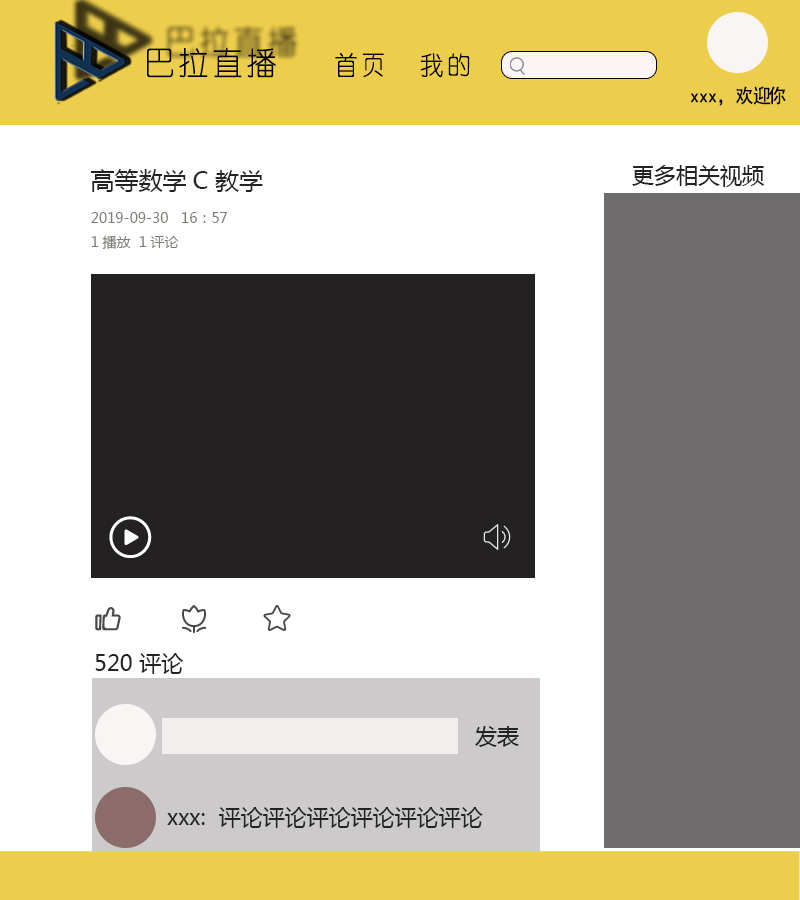
<style>
.page{position:relative;width:800px;height:900px;background:#ffffff}
.page>*{position:absolute;margin:0}
.t1{font:14px "MicrosoftYaHei";color:#7b7c74}
.t2{font:24px "MicrosoftYaHei";color:#232321}
.t3{font:22px "MicrosoftYaHei";color:#232321}
</style>
<div class="page">
<p class="t1" style="left:90px;top:169px;width:173px;height:80px"><span class="t2">高等数学C教学<br></span>2019-09-30   16：57<br>1播放  1评论</p>
<p class="t3" style="left:632px;top:165px;width:132px;height:22px">更多相关视频</p>
<p class="t3" style="left:95px;top:653px;width:88px;height:21px">520 评论</p>
<p class="t3" style="left:475px;top:726px;width:44px;height:21px">发表</p>
<p class="t3" style="left:167px;top:807px;width:316px;height:21px">xxx:  评论评论评论评论评论评论</p>
</div>
